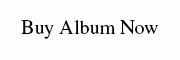
<style>
.page{position:relative;width:180px;height:60px;background:#fdfdfd}
.page>*{position:absolute;margin:0}
.t1{font:20px "STIXGeneral-Regular";color:#000000}
</style>
<div class="page">
<p class="t1" style="left:21px;top:20px;width:137px;height:19px">Buy Album Now</p>
</div>
